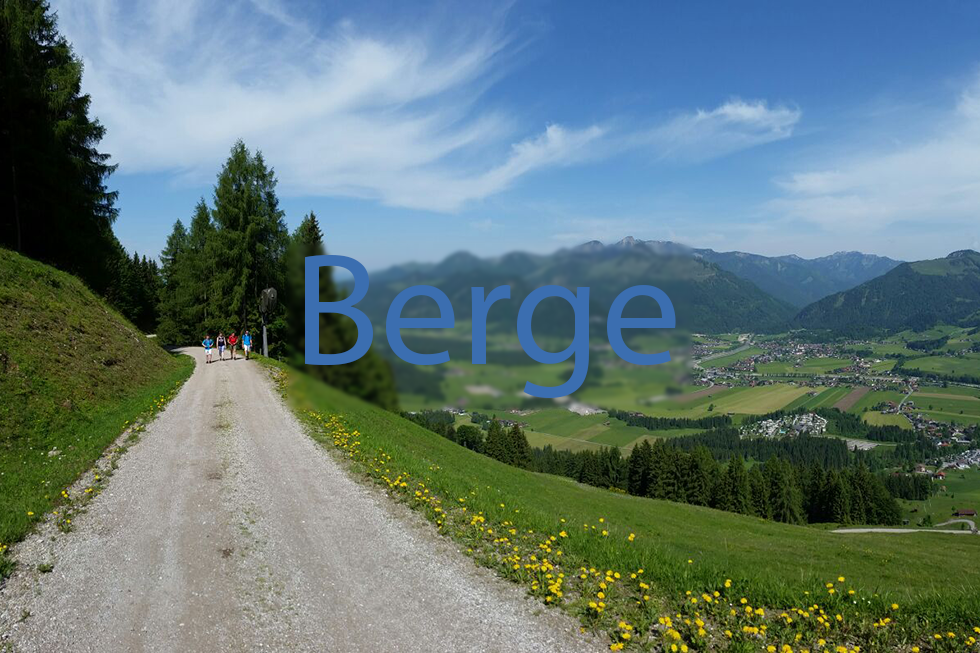
<style>
.page{position:relative;width:980px;height:653px}
.page>*{position:absolute;margin:0}
.t1{font:160px "MyriadPro-Regular";color:#3b6eb0}
</style>
<div class="page">
<p class="t1" style="left:305px;top:255px;width:371px;height:143px">Berge</p>
</div>
